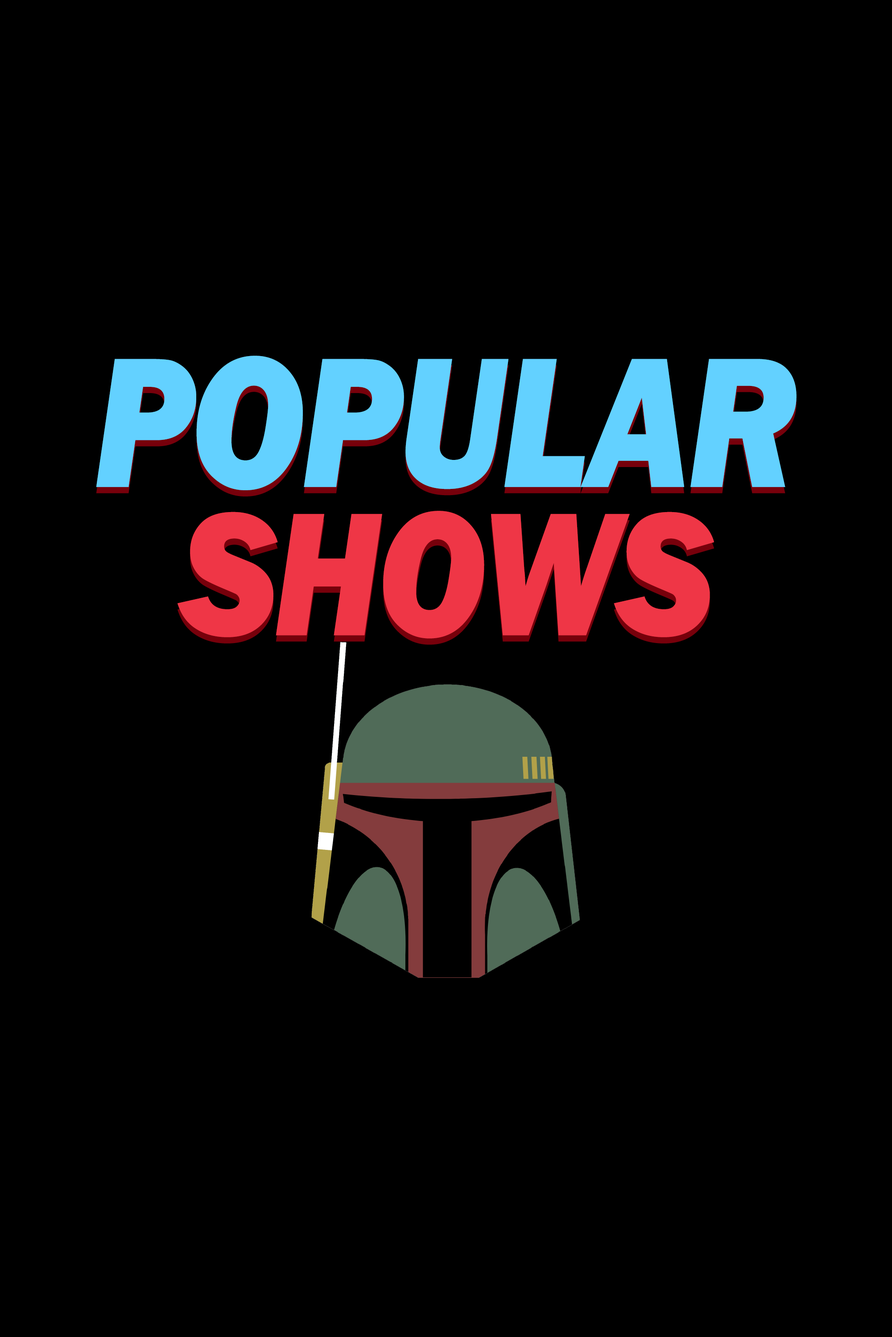
<style>
.page{position:relative;width:892px;height:1337px;background:#000000}
.page>*{position:absolute;margin:0}
.t1{font:191.9px "FranklinGothic-HeavyItalic";letter-spacing:-0.02em;color:#63d1ff;scale:0.87 1}
.t2{font:182px "FranklinGothic-HeavyItalic";letter-spacing:-0.02em;color:#ef3646;scale:0.87 1}
</style>
<div class="page">
<p class="t1" style="left:96px;top:356px;width:700px;height:134px">POPULAR</p>
<p class="t2" style="left:177px;top:511px;width:537px;height:128px">SHOWS</p>
</div>
